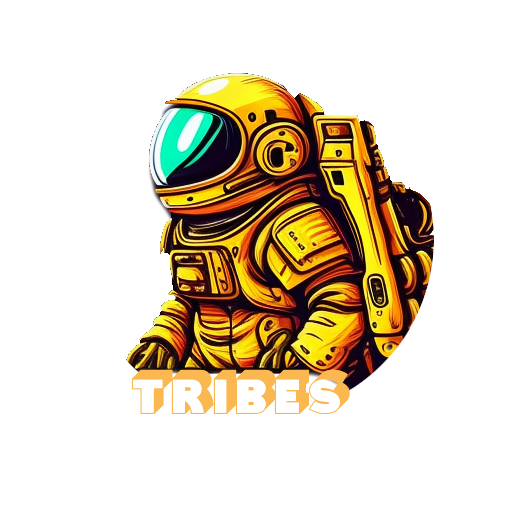
<style>
.page{position:relative;width:512px;height:512px;background:#ffffff}
.page>*{position:absolute;margin:0}
.t1{font:48px "P22GlaserKitchen-Regular";color:#fcb850}
</style>
<div class="page">
<p class="t1" style="left:131px;top:369px;width:219px;height:45px">Tribes</p>
</div>
